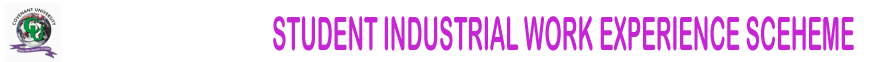
<style>
.page{position:relative;width:872px;height:62px;background:#ffffff}
.page>*{position:absolute;margin:0}
.t1{font:46.2px "ArialRoundedMTBold";color:#c625d4;scale:0.47 1}
</style>
<div class="page">
<p class="t1" style="left:273px;top:16px;width:581px;height:35px">STUDENT INDUSTRIAL WORK EXPERIENCE SCEHEME</p>
</div>
